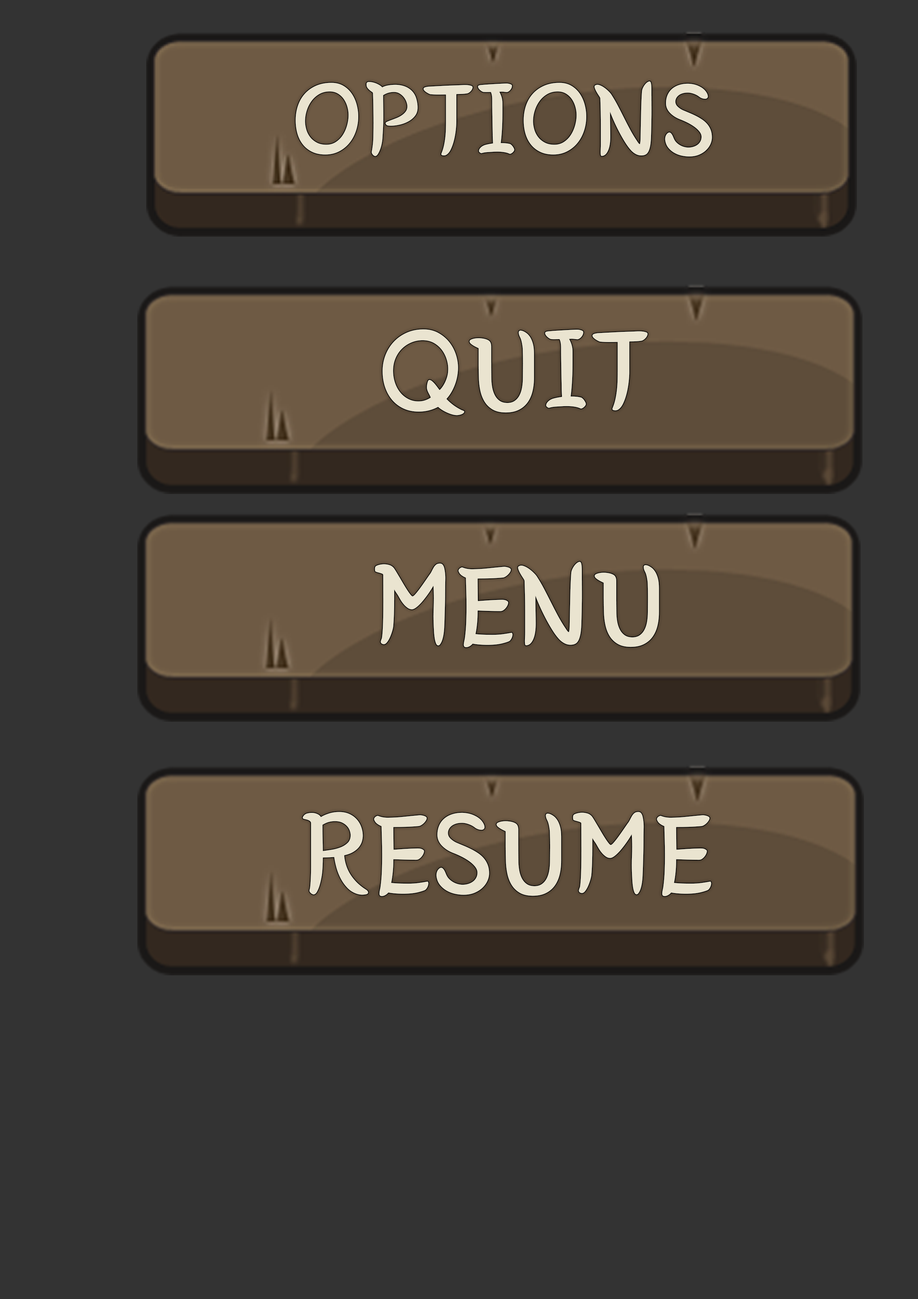
<style>
.page{position:relative;width:918px;height:1299px;background:#333333}
.page>*{position:absolute;margin:0}
.t1{font:108.2px "BMYEONSUNG";color:#eae4d0;font-weight:bold}
.t2{font:121.4px "BMYEONSUNG";color:#eae4d0;font-weight:bold}
.t3{font:121.2px "BMYEONSUNG";color:#eae4d0;font-weight:bold}
.t4{font:121.8px "BMYEONSUNG";color:#eae4d0;font-weight:bold}
</style>
<div class="page">
<p class="t1" style="left:295px;top:81px;width:417px;height:76px">OPTIONS</p>
<p class="t2" style="left:382px;top:329px;width:266px;height:86px">QUIT</p>
<p class="t3" style="left:375px;top:562px;width:284px;height:85px">MENU</p>
<p class="t4" style="left:302px;top:812px;width:410px;height:84px">RESUME</p>
</div>
